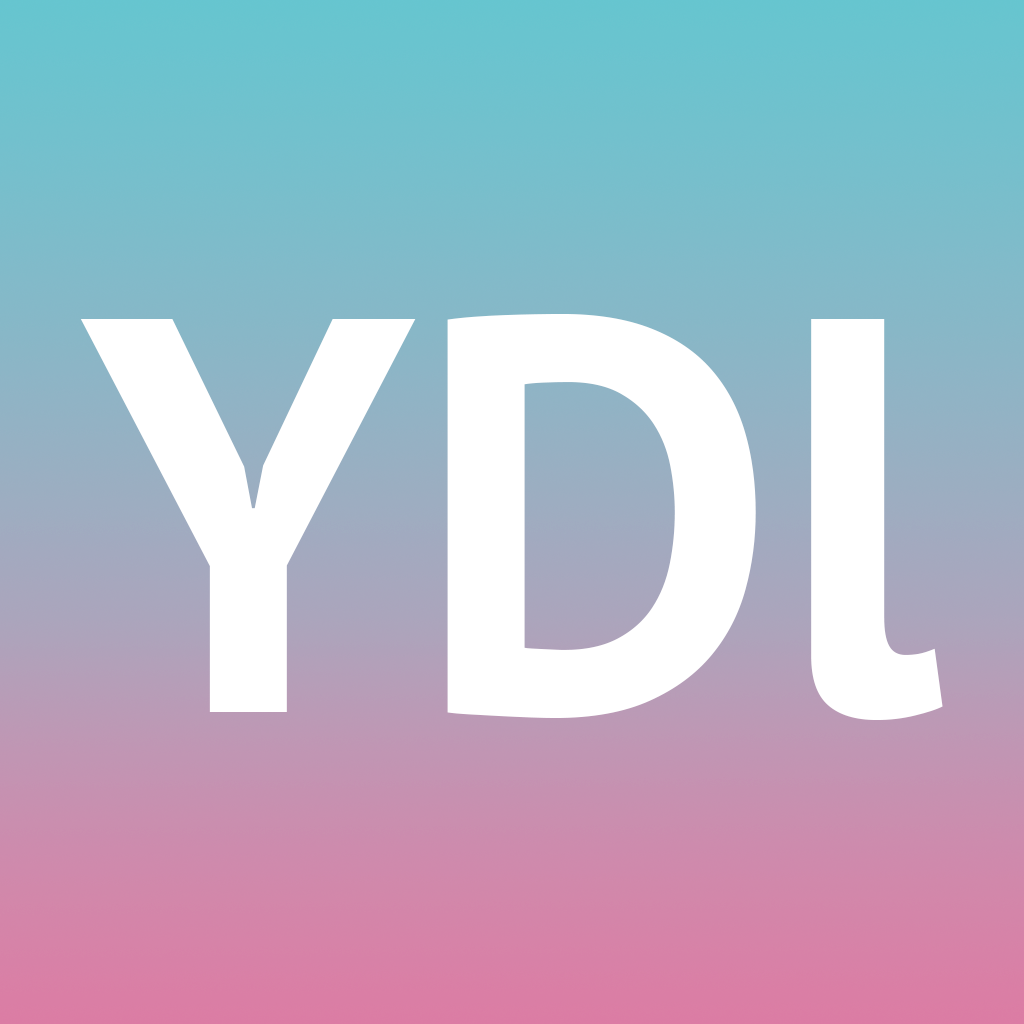
<style>
.page{position:relative;width:1024px;height:1024px}
.page>*{position:absolute;margin:0}
.t1{font:560.9px "PTSans-Bold";color:#ffffff}
.t2{font:12px "PTSans-Regular";color:#ffffff}
</style>
<div class="page">
<p class="t1" style="left:80px;top:314px;width:863px;height:406px"><span class="t2"><br></span>YDl</p>
</div>
